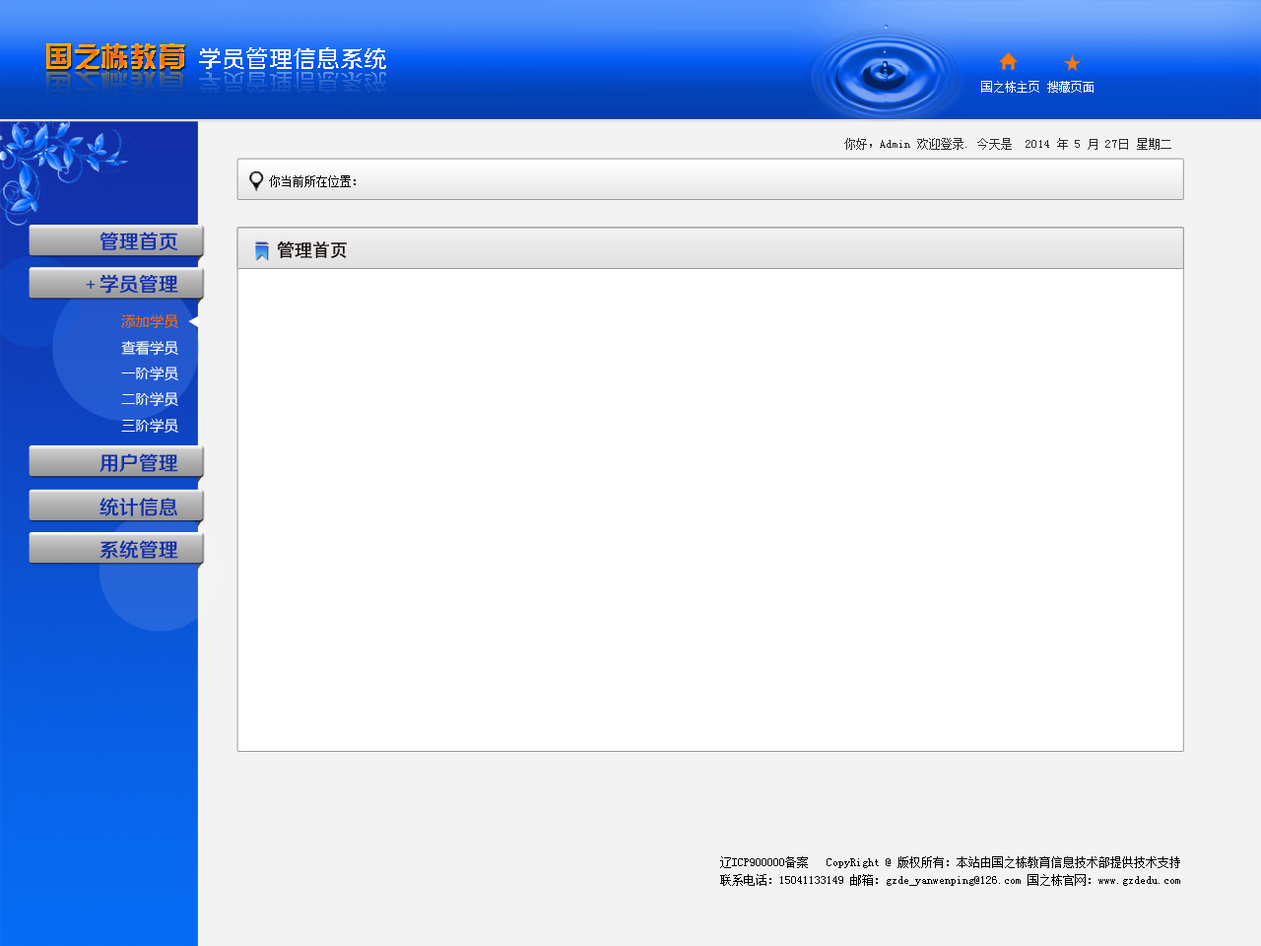
<style>
.page{position:relative;width:1261px;height:946px;background:#ffffff}
.page>*{position:absolute;margin:0}
.t1{font:28.4px "HYk2gj"}
.t2{font:23.6px "FZZZHUNHJW--GB1-0";color:#ffffff}
.t3{font:23.6px "FZZZHUNHJW--GB1-0"}
.t4{font:11.8px "SimSun";color:#ffffff}
.t5{font:11.8px "SimSun";color:#2a2a2a}
.t6{font:11.8px "SimSun";color:#000000}
.t7{font:19.7px "FZZZHUNHJW--GB1-0";color:#1231ab}
.t8{font:17.7px "SimHei";color:#190e0c}
.t9{font:14.2px "FZZZHUNHJW--GB1-0";color:#1130a9}
.t10{font:19.7px "FZZZHUNHJW--GB1-0";color:#1230a9}
.t11{font:14.2px "MicrosoftYaHei";color:#ff6a00}
.t12{font:14.2px "MicrosoftYaHei";color:#ffffff}
.t13{font:11.8px/17.7px "SimSun";color:#000000}
</style>
<div class="page">
<p class="t1" style="left:46px;top:43px;width:139px;height:27px">国之栋教育</p>
<p class="t2" style="left:199px;top:47px;width:187px;height:22px">学员管理信息系统</p>
<p class="t1" style="left:46px;top:71px;width:139px;height:27px">国之栋教育</p>
<p class="t3" style="left:199px;top:72px;width:187px;height:22px">学员管理信息系统</p>
<p class="t4" style="left:981px;top:81px;width:58px;height:12px">国之栋主页</p>
<p class="t4" style="left:1047px;top:81px;width:46px;height:12px">搜藏页面</p>
<p class="t5" style="left:844px;top:138px;width:327px;height:12px">你好，Admin 欢迎登录. 今天是  2014 年 5 月 27日 星期二</p>
<p class="t6" style="left:269px;top:175px;width:87px;height:12px">你当前所在位置：</p>
<p class="t7" style="left:99px;top:231px;width:78px;height:19px">管理首页</p>
<p class="t8" style="left:277px;top:241px;width:70px;height:17px">管理首页</p>
<p class="t9" style="left:86px;top:280px;width:10px;height:9px">+</p>
<p class="t10" style="left:99px;top:275px;width:79px;height:19px">学员管理</p>
<p class="t11" style="left:121px;top:314px;width:57px;height:14px">添加学员</p>
<p class="t12" style="left:121px;top:340px;width:57px;height:16px">查看学员</p>
<p class="t12" style="left:121px;top:366px;width:57px;height:14px">一阶学员</p>
<p class="t12" style="left:121px;top:392px;width:57px;height:14px">二阶学员</p>
<p class="t12" style="left:121px;top:419px;width:57px;height:13px">三阶学员</p>
<p class="t10" style="left:99px;top:453px;width:79px;height:19px">用户管理</p>
<p class="t10" style="left:99px;top:497px;width:78px;height:19px">统计信息</p>
<p class="t10" style="left:99px;top:540px;width:79px;height:19px">系统管理</p>
<p class="t13" style="left:720px;top:856px;width:460px;height:30px;text-align:right">辽ICP900000备案   CopyRight @ 版权所有：本站由国之栋教育信息技术部提供技术支持<br>联系电话：15041133149 邮箱：gzde_yanwenping@126.com 国之栋官网：www.gzdedu.com</p>
</div>
